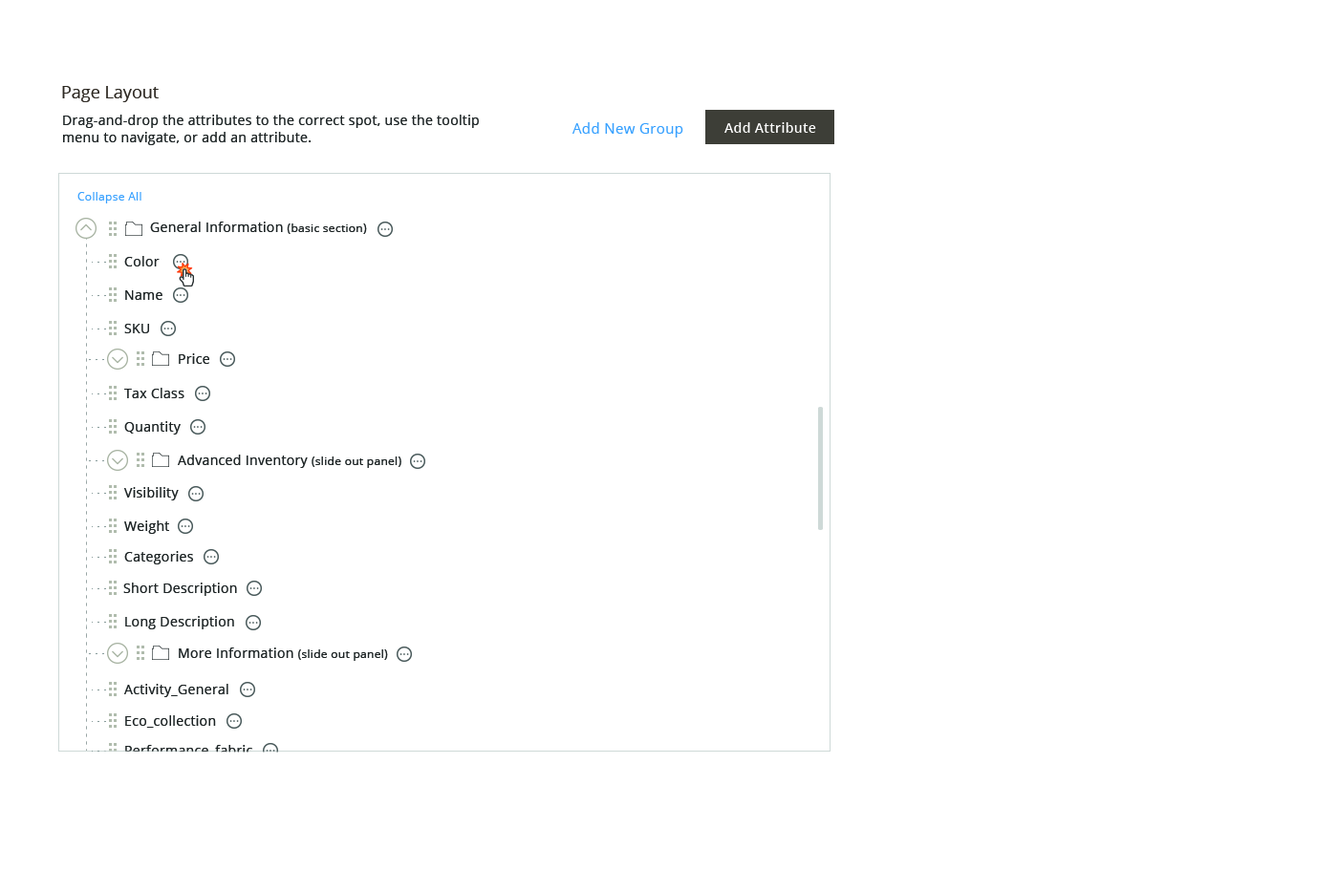
<style>
.page{position:relative;width:1338px;height:891px;background:#ffffff}
.page>*{position:absolute;margin:0}
.t1{font:17.2px "OpenSans";color:#2d2923}
.t2{font:13.4px/17.2px "OpenSans";letter-spacing:0.025em;color:#1e2425}
.t3{font:13.4px/49.7px "OpenSans";letter-spacing:0.025em;color:#1e2425}
.t4{font:14.3px "OpenSans";letter-spacing:0.025em;color:#38a1ff}
.t5{font:13.4px "OpenSans-Semibold";letter-spacing:0.025em;color:#ffffff}
.t6{font:11.5px "OpenSans";letter-spacing:0.025em;color:#38a1ff}
.t7{font:13.4px "OpenSans";letter-spacing:0.025em;color:#1e2425}
.t8{font:11.5px "OpenSans";letter-spacing:0.025em;color:#1e2425}
.t9{font:13.4px "OpenSans";letter-spacing:0.025em}
</style>
<div class="page">
<p class="t1" style="left:62px;top:86px;width:97px;height:16px">Page Layout</p>
<p class="t2" style="left:63px;top:115px;width:416px;height:30px"><span class="t3">Drag-and-drop the attributes to the correct spot, </span>use the tooltip<br>menu to navigate, or add an attribute.</p>
<p class="t4" style="left:572px;top:122px;width:111px;height:16px">Add New Group</p>
<p class="t5" style="left:724px;top:122px;width:92px;height:11px">Add Attribute</p>
<p class="t6" style="left:77px;top:192px;width:64px;height:12px">Collapse All</p>
<p class="t7" style="left:150px;top:222px;width:217px;height:12px">General Information <span class="t8">(basic section)</span></p>
<p class="t7" style="left:124px;top:256px;width:36px;height:11px">Color</p>
<p class="t7" style="left:125px;top:290px;width:37px;height:10px">Name</p>
<p class="t7" style="left:124px;top:324px;width:25px;height:9px">SKU</p>
<p class="t7" style="left:179px;top:354px;width:30px;height:10px">Price</p>
<p class="t7" style="left:124px;top:388px;width:60px;height:10px">Tax Class</p>
<p class="t7" style="left:124px;top:421px;width:57px;height:14px">Quantity</p>
<p class="t7" style="left:178px;top:455px;width:223px;height:13px">Advanced Inventory <span class="t8">(slide out panel)</span></p>
<p class="t7" style="left:124px;top:487px;width:55px;height:14px">Visibility</p>
<p class="t7" style="left:124px;top:521px;width:45px;height:13px">Weight</p>
<p class="t7" style="left:124px;top:551px;width:69px;height:14px">Categories</p>
<p class="t7" style="left:123px;top:583px;width:114px;height:13px">Short Description</p>
<p class="t7" style="left:125px;top:616px;width:109px;height:14px">Long Description</p>
<p class="t8" style="left:179px;top:648px;width:209px;height:13px"><span class="t7">More Information </span>(slide out panel)</p>
<p class="t7" style="left:124px;top:684px;width:104px;height:13px">Activity_General</p>
<p class="t7" style="left:125px;top:716px;width:91px;height:12px">Eco_collection</p>
<p class="t9" style="left:125px;top:745px;width:127px;height:13px">Performance_fabric</p>
</div>
